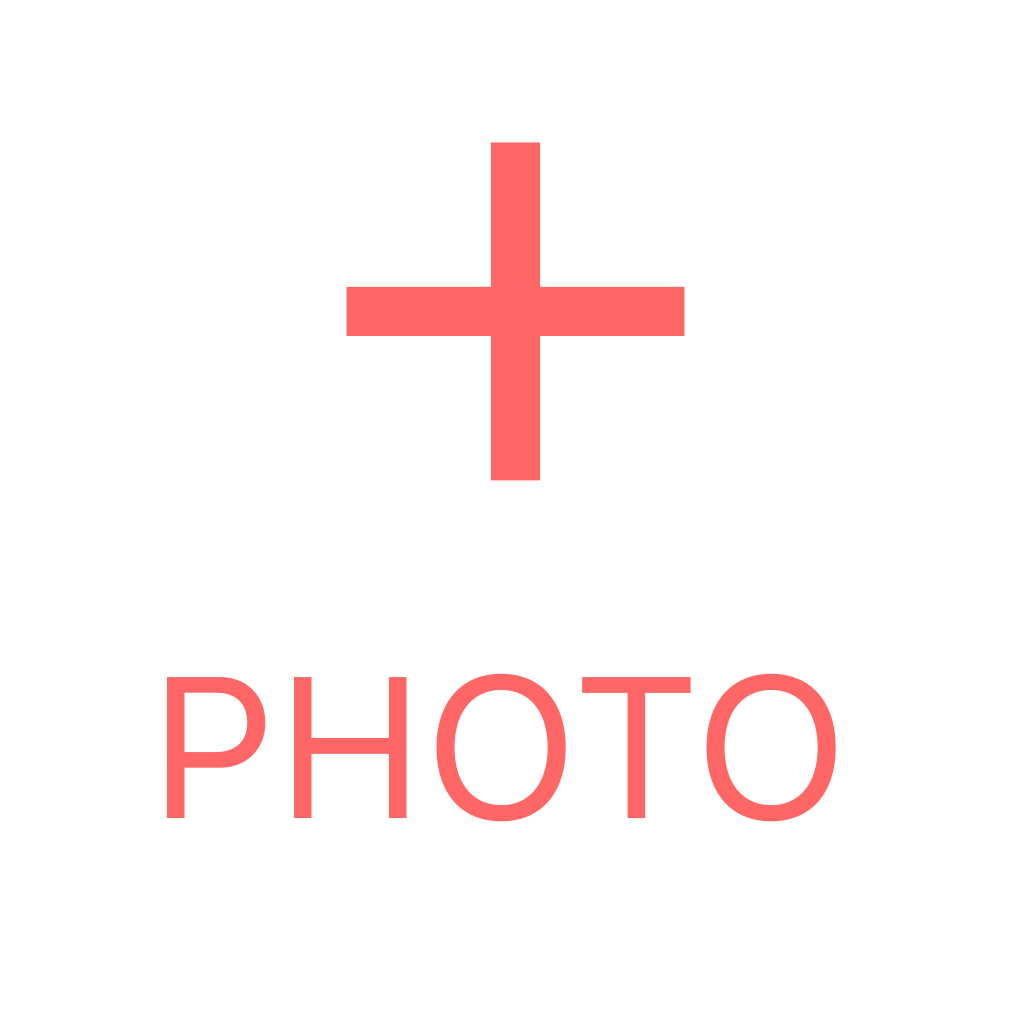
<style>
.page{position:relative;width:1024px;height:1024px;background:#ffffff}
.page>*{position:absolute;margin:0}
.t1{font:680px "SFUIText-Regular";color:#ff6666}
.t2{font:200px "SFUIText-Regular";color:#ff6666}
</style>
<div class="page">
<p class="t1" style="left:346px;top:142px;width:339px;height:339px">+</p>
<p class="t2" style="left:166px;top:673px;width:670px;height:149px">PHOTO</p>
</div>
